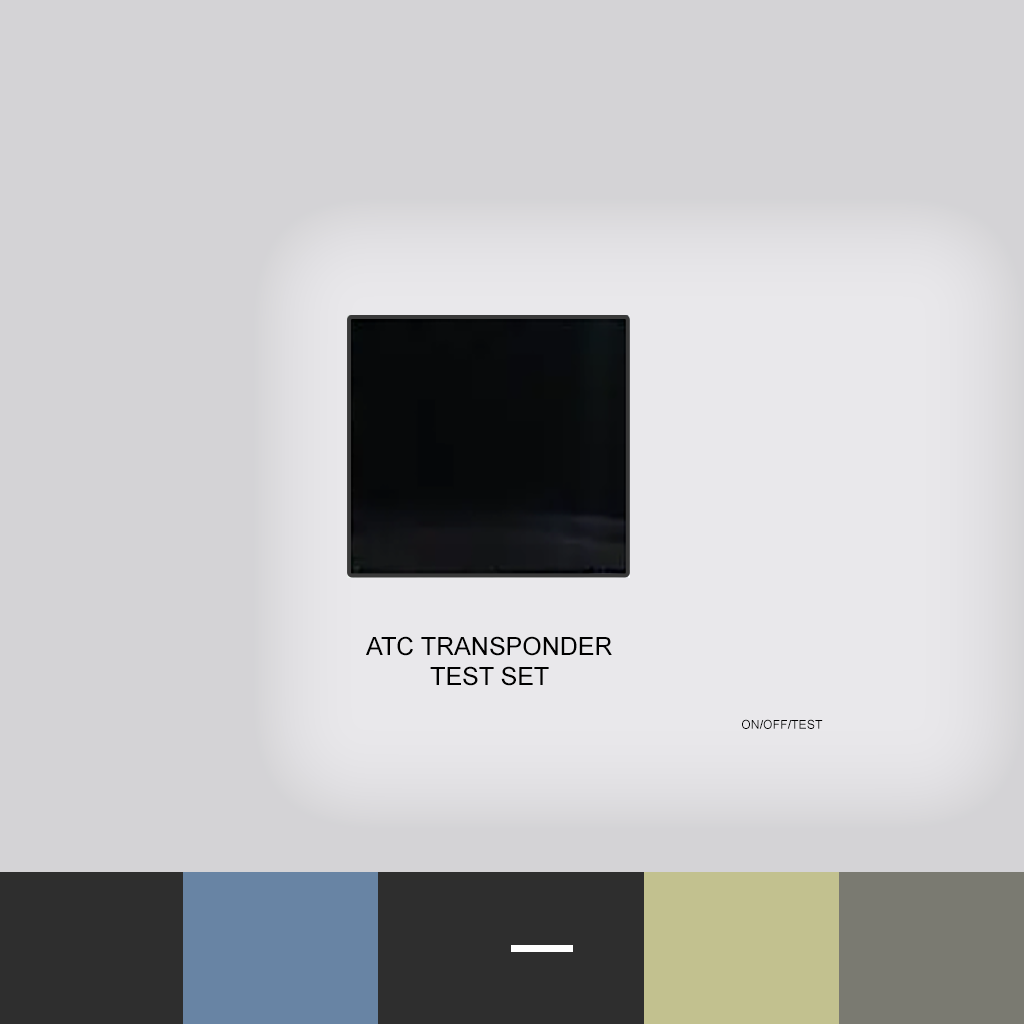
<style>
.page{position:relative;width:1024px;height:1024px;background:#d4d3d6}
.page>*{position:absolute;margin:0}
.t1{font:25px "ArialMT";color:#000000}
.t2{font:12.3px "ArialMT";color:#000000}
</style>
<div class="page">
<p class="t1" style="left:366px;top:636px;width:246px;height:50px;text-align:center">ATC TRANSPONDER<br>TEST SET</p>
<p class="t2" style="left:742px;top:719px;width:81px;height:10px">ON/OFF/TEST</p>
</div>
